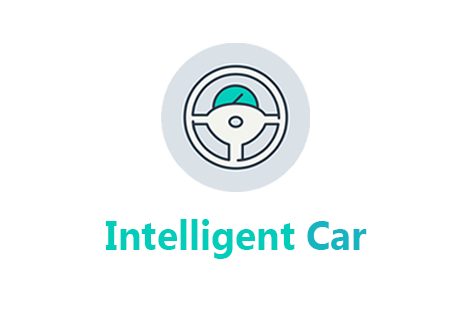
<style>
.page{position:relative;width:470px;height:330px;background:#ffffff}
.page>*{position:absolute;margin:0}
.t1{font:40.6px "MicrosoftNewTaiLue-Bold";color:#02ccba;scale:0.96 1}
.t2{font:40.6px "MicrosoftNewTaiLue-Bold";color:#16b4c1;scale:0.96 1}
</style>
<div class="page">
<p class="t1" style="left:105px;top:219px;width:262px;height:40px">Intelligent <span class="t2">Car</span></p>
</div>
